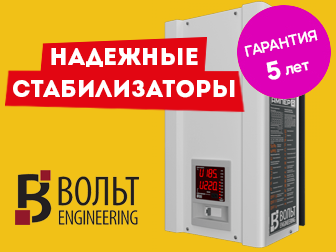
<style>
.page{position:relative;width:336px;height:252px;background:#f1c117}
.page>*{position:absolute;margin:0}
.t1{font:14.7px "MusticaPro-SemiBold";color:#ffffff;text-transform:uppercase}
.t2{font:24px/32px "Intro";color:#ffffff}
.t3{font:24px "MusticaPro-SemiBold";color:#ffffff;text-transform:uppercase;font-weight:bold}
.t4{font:16px "MusticaPro-SemiBold";color:#ffffff}
</style>
<div class="page">
<p class="t1" style="left:244px;top:29px;width:74px;height:28px;rotate:-13deg">Гарантия</p>
<p class="t2" style="left:13px;top:48px;width:222px;height:50px;text-align:center">Надежные<br>стабилизаторы</p>
<p class="t3" style="left:266px;top:60px;width:15px;height:20px;rotate:-13deg">5</p>
<p class="t4" style="left:285px;top:61px;width:24px;height:15px;rotate:-13deg">лет</p>
</div>
